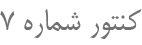
<style>
.page{position:relative;width:142px;height:45px;background:#ffffff}
.page>*{position:absolute;margin:0}
.t1{font:36px "BMitra";color:#717171}
</style>
<div class="page">
<p class="t1" style="left:0px;top:9px;width:142px;height:30px">کنتور شماره 7</p>
</div>
